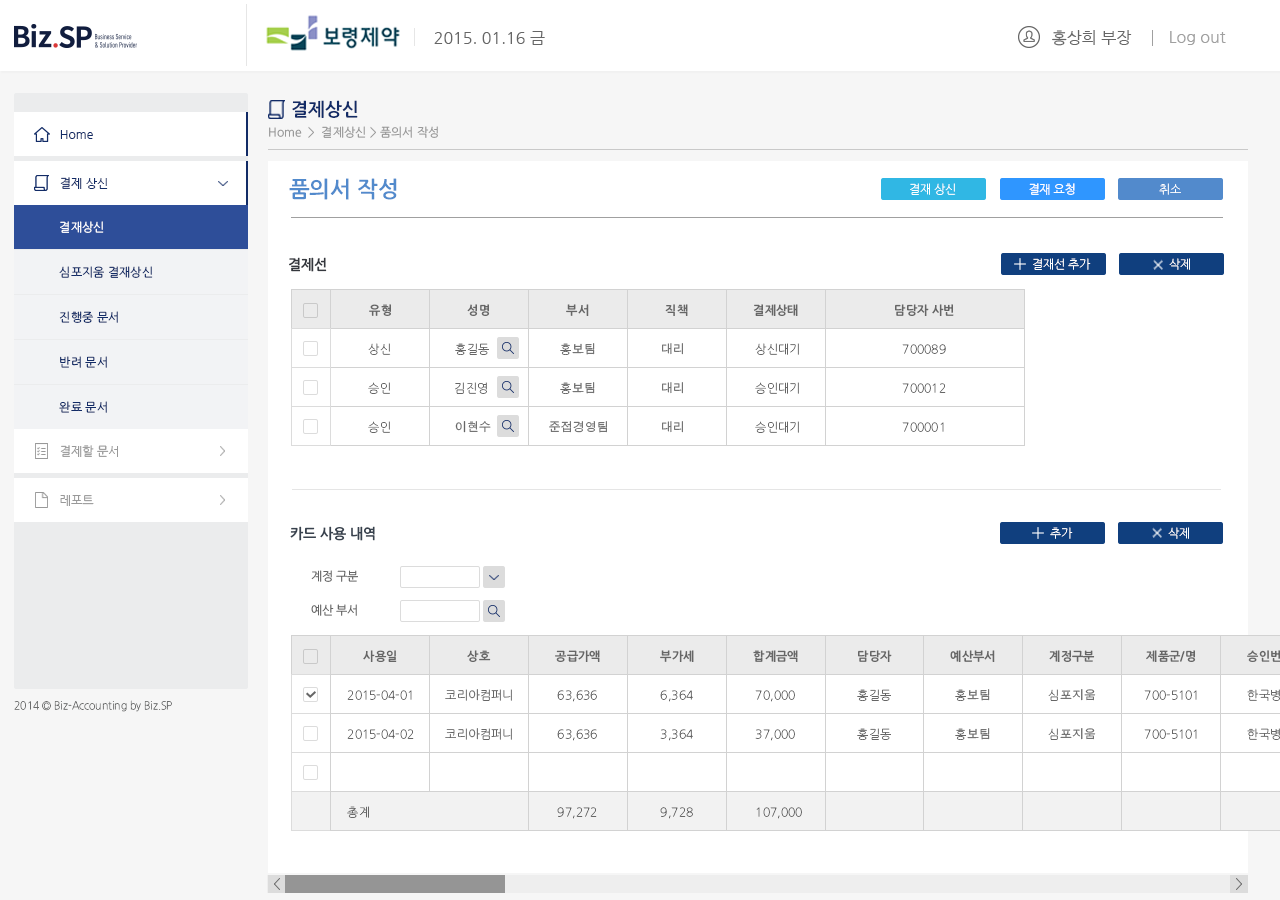
<style>
.page{position:relative;width:1280px;height:900px;background:#ffffff}
.page>*{position:absolute;margin:0}
.t1{font:16px "NanumGothic";color:#666666}
.t2{font:16px "NanumGothic";color:#a0a0a0}
.t3{font:18px "NanumGothicOTFBold";color:#122b66}
.t4{font:12px "NanumGothicOTF";color:#999999}
.t5{font:12px "NanumGothic";color:#122b66}
.t6{font:22px "NanumGothicOTFBold";color:#528acc}
.t7{font:12px "NanumGothicOTFLight";letter-spacing:-0.025em;color:#ffffff}
.t8{font:12px "NanumGothic";letter-spacing:-0.025em;color:#ffffff}
.t9{font:12px "NanumGothicOTF";color:#ffffff}
.t10{font:14px "NanumGothicOTFBold";color:#34373d}
.t11{font:12px "NanumGothicOTF";color:#122b66}
.t12{font:12px "NanumGothicOTFBold";color:#666666}
.t13{font:12px "NanumGothicOTFLight";color:#666666}
.t14{font:12px "AppleGothic";color:#666666}
.t15{font:12px "NanumGothic";color:#999999}
.t16{font:14px "NanumGothicOTFBold";color:#38424e}
.t17{font:12px "NanumGothicOTF";letter-spacing:-0.025em;color:#666666}
.t18{font:11px "NanumGothicOTFLight";color:#6c6d6d;scale:0.94 1}
.t19{font:12px "NanumGothicOTFLight"}
</style>
<div class="page">
<p class="t1" style="left:1052px;top:30px;width:80px;height:16px">홍상희 부장</p>
<p class="t1" style="left:434px;top:31px;width:111px;height:14px">2015. 01.16 금</p>
<p class="t2" style="left:1170px;top:31px;width:56px;height:14px">Log out</p>
<p class="t3" style="left:292px;top:100px;width:66px;height:18px">결제상신</p>
<p class="t4" style="left:269px;top:126px;width:169px;height:12px">Home  &gt;  결제상신 &gt; 품의서 작성</p>
<p class="t5" style="left:60px;top:130px;width:33px;height:9px">Home</p>
<p class="t5" style="left:60px;top:130px;width:33px;height:9px">Home</p>
<p class="t5" style="left:60px;top:177px;width:48px;height:12px">결제 상신</p>
<p class="t6" style="left:289px;top:178px;width:108px;height:22px">품의서 작성</p>
<p class="t7" style="left:910px;top:183px;width:46px;height:12px">결재 상신</p>
<p class="t8" style="left:1029px;top:183px;width:46px;height:12px">결재 요청</p>
<p class="t7" style="left:1159px;top:183px;width:22px;height:12px">취소</p>
<p class="t9" style="left:60px;top:221px;width:44px;height:12px">결재상신</p>
<p class="t10" style="left:289px;top:257px;width:38px;height:15px">결제선</p>
<p class="t11" style="left:59px;top:266px;width:94px;height:12px">심포지움 결재상신</p>
<p class="t7" style="left:1033px;top:258px;width:58px;height:12px">결재선 추가</p>
<p class="t7" style="left:1169px;top:258px;width:21px;height:12px">삭제</p>
<p class="t12" style="left:369px;top:304px;width:22px;height:12px">유형</p>
<p class="t12" style="left:467px;top:304px;width:23px;height:12px">성명</p>
<p class="t12" style="left:566px;top:304px;width:23px;height:12px">부서</p>
<p class="t12" style="left:665px;top:304px;width:23px;height:12px">직책</p>
<p class="t12" style="left:753px;top:304px;width:45px;height:12px">결제상태</p>
<p class="t12" style="left:895px;top:304px;width:59px;height:12px">담당자 사번</p>
<p class="t11" style="left:59px;top:311px;width:59px;height:12px">진행중 문서</p>
<p class="t13" style="left:368px;top:343px;width:23px;height:12px">상신</p>
<p class="t13" style="left:455px;top:343px;width:34px;height:12px">홍길동</p>
<p class="t14" style="left:560px;top:343px;width:35px;height:12px"><span class="t13">홍</span>보팀</p>
<p class="t14" style="left:662px;top:343px;width:21px;height:12px">대리</p>
<p class="t13" style="left:755px;top:343px;width:44px;height:12px">상신대기</p>
<p class="t13" style="left:902px;top:344px;width:44px;height:10px">700089</p>
<p class="t11" style="left:60px;top:356px;width:47px;height:12px">반려 문서</p>
<p class="t13" style="left:368px;top:382px;width:22px;height:12px">승인</p>
<p class="t13" style="left:455px;top:382px;width:32px;height:12px">김진영</p>
<p class="t14" style="left:560px;top:382px;width:35px;height:12px"><span class="t13">홍</span>보팀</p>
<p class="t14" style="left:662px;top:382px;width:21px;height:12px">대리</p>
<p class="t13" style="left:755px;top:382px;width:44px;height:12px">승인대기</p>
<p class="t13" style="left:902px;top:383px;width:44px;height:10px">700012</p>
<p class="t11" style="left:59px;top:401px;width:48px;height:12px">완료 문서</p>
<p class="t13" style="left:368px;top:421px;width:22px;height:12px">승인</p>
<p class="t14" style="left:455px;top:421px;width:36px;height:12px">이현수</p>
<p class="t14" style="left:549px;top:421px;width:58px;height:12px">준접경영팀</p>
<p class="t14" style="left:662px;top:421px;width:21px;height:12px">대리</p>
<p class="t13" style="left:755px;top:421px;width:44px;height:12px">승인대기</p>
<p class="t13" style="left:902px;top:422px;width:42px;height:10px">700001</p>
<p class="t15" style="left:60px;top:445px;width:58px;height:12px">결제할 문서</p>
<p class="t15" style="left:60px;top:445px;width:58px;height:12px">결제할 문서</p>
<p class="t15" style="left:60px;top:495px;width:34px;height:11px">레포트</p>
<p class="t15" style="left:60px;top:495px;width:34px;height:11px">레포트</p>
<p class="t16" style="left:290px;top:526px;width:85px;height:15px">카드 사용 내역</p>
<p class="t7" style="left:1050px;top:527px;width:23px;height:12px">추가</p>
<p class="t7" style="left:1168px;top:527px;width:21px;height:12px">삭제</p>
<p class="t17" style="left:311px;top:570px;width:47px;height:12px">계정 구분</p>
<p class="t17" style="left:311px;top:604px;width:46px;height:12px">예산 부서</p>
<p class="t12" style="left:363px;top:650px;width:34px;height:12px">사용일</p>
<p class="t12" style="left:467px;top:650px;width:24px;height:12px">상호</p>
<p class="t12" style="left:555px;top:650px;width:45px;height:12px">공급가액</p>
<p class="t12" style="left:660px;top:650px;width:34px;height:12px">부가세</p>
<p class="t12" style="left:753px;top:650px;width:45px;height:12px">합계금액</p>
<p class="t12" style="left:858px;top:650px;width:34px;height:12px">담당자</p>
<p class="t12" style="left:950px;top:650px;width:45px;height:12px">예산부서</p>
<p class="t12" style="left:1049px;top:650px;width:46px;height:12px">계정구분</p>
<p class="t12" style="left:1146px;top:650px;width:50px;height:12px">제품군/명</p>
<p class="t13" style="left:445px;top:689px;width:67px;height:12px">코리<span class="t14">아</span>컴퍼니</p>
<p class="t13" style="left:857px;top:689px;width:34px;height:12px">홍길동</p>
<p class="t14" style="left:955px;top:689px;width:35px;height:12px"><span class="t13">홍</span>보팀</p>
<p class="t14" style="left:1048px;top:689px;width:48px;height:12px"><span class="t13">심</span>포지움</p>
<p class="t18" style="left:14px;top:700px;width:158px;height:12px">2014 © Biz-Accounting by Biz.SP</p>
<p class="t13" style="left:347px;top:690px;width:65px;height:10px">2015-04-01</p>
<p class="t13" style="left:347px;top:690px;width:65px;height:10px">2015-04-01</p>
<p class="t13" style="left:557px;top:690px;width:40px;height:12px">63,636</p>
<p class="t13" style="left:557px;top:690px;width:40px;height:12px">63,636</p>
<p class="t13" style="left:660px;top:690px;width:33px;height:12px">6,363</p>
<p class="t13" style="left:660px;top:690px;width:33px;height:12px">6,364</p>
<p class="t13" style="left:755px;top:690px;width:40px;height:12px">70,000</p>
<p class="t13" style="left:755px;top:690px;width:40px;height:12px">70,000</p>
<p class="t13" style="left:1144px;top:690px;width:53px;height:10px">700-5101</p>
<p class="t13" style="left:347px;top:729px;width:65px;height:10px">2015-04-01</p>
<p class="t13" style="left:347px;top:729px;width:67px;height:10px">2015-04-02</p>
<p class="t13" style="left:445px;top:728px;width:67px;height:12px">코리<span class="t14">아</span>컴퍼니</p>
<p class="t13" style="left:557px;top:729px;width:40px;height:12px">63,636</p>
<p class="t13" style="left:557px;top:729px;width:40px;height:12px">63,636</p>
<p class="t19" style="left:660px;top:729px;width:33px;height:12px">6,363</p>
<p class="t13" style="left:660px;top:729px;width:33px;height:12px">3,364</p>
<p class="t13" style="left:755px;top:729px;width:40px;height:12px">70,000</p>
<p class="t13" style="left:755px;top:729px;width:40px;height:12px">37,000</p>
<p class="t13" style="left:857px;top:728px;width:34px;height:12px">홍길동</p>
<p class="t14" style="left:955px;top:728px;width:35px;height:12px"><span class="t13">홍</span>보팀</p>
<p class="t14" style="left:1048px;top:728px;width:48px;height:12px"><span class="t13">심</span>포지움</p>
<p class="t13" style="left:1144px;top:729px;width:53px;height:10px">700-5101</p>
<p class="t13" style="left:347px;top:806px;width:22px;height:12px">총계</p>
<p class="t13" style="left:557px;top:807px;width:40px;height:12px">97,272</p>
<p class="t13" style="left:660px;top:807px;width:33px;height:12px">9,728</p>
<p class="t13" style="left:756px;top:807px;width:46px;height:12px">107,000</p>
</div>
